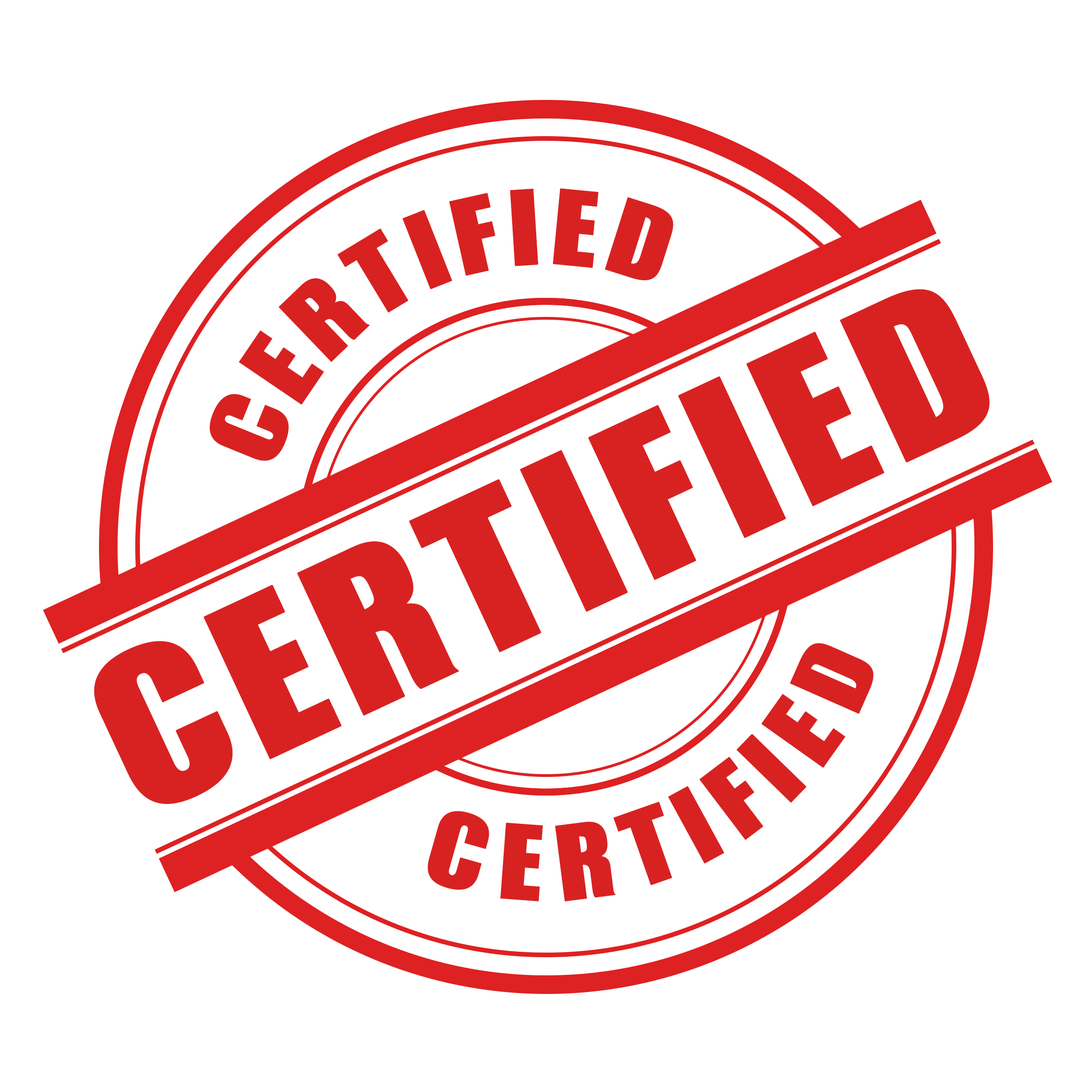
<style>
.page{position:relative;width:1092px;height:1092px;background:#ffffff}
.page>*{position:absolute;margin:0}
.t1{font:100.2px "PFFusionSansPro-Black";letter-spacing:0.02em;color:#d82221;text-transform:uppercase;font-weight:bold;scale:1.19 1}
.t2{font:207.8px "PFFusionSansPro-Black";letter-spacing:0.02em;color:#d82221;text-transform:uppercase;font-weight:bold;scale:1.14 1}
.t3{font:100.2px "PFFusionSansPro-Black";letter-spacing:0.02em;color:#d82221;text-transform:uppercase;font-weight:bold;scale:1.14 1}
</style>
<div class="page">
<p class="t1" style="left:210px;top:188px;width:463px;height:273px;rotate:-25deg">certified</p>
<p class="t2" style="left:94px;top:289px;width:896px;height:515px;rotate:-25deg">CERTIFIED</p>
<p class="t3" style="left:428px;top:643px;width:446px;height:258px;rotate:-25deg">certified</p>
</div>
